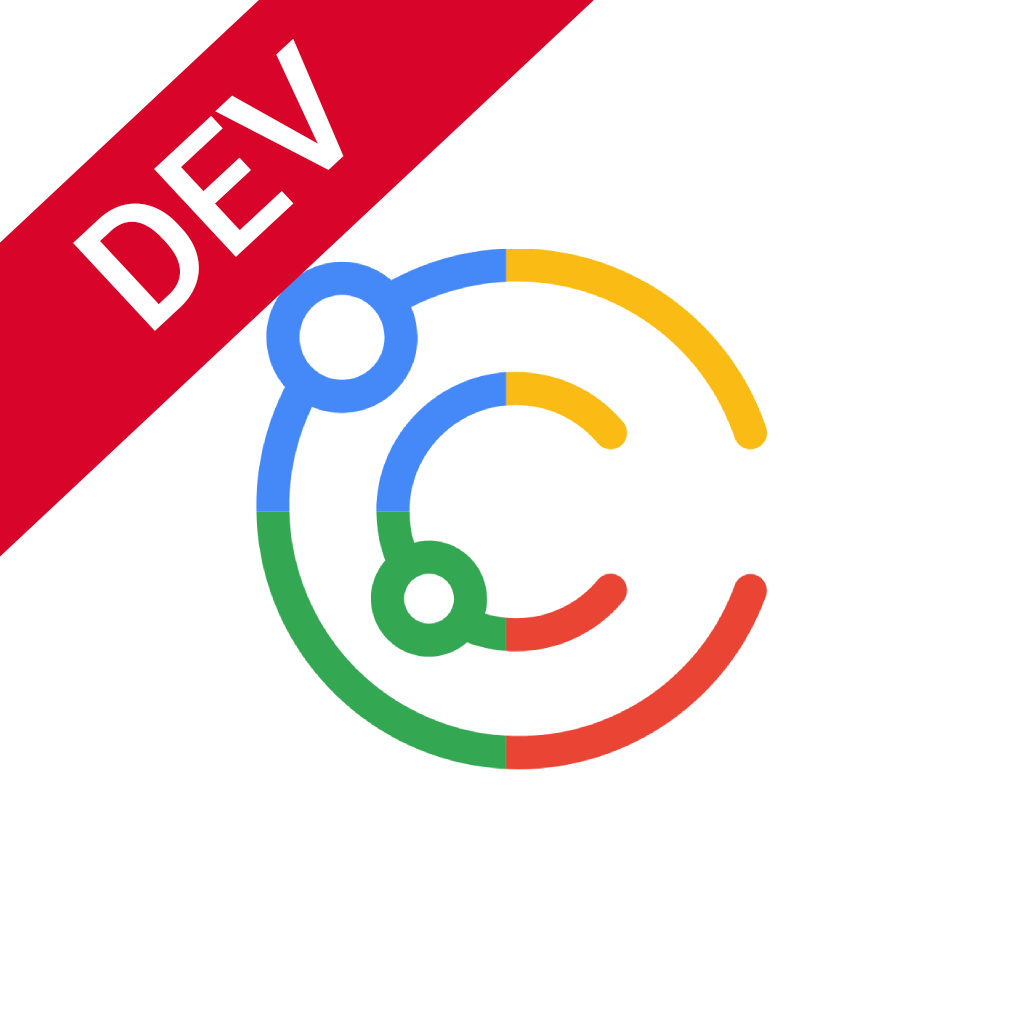
<style>
.page{position:relative;width:1024px;height:1024px;background:#ffffff}
.page>*{position:absolute;margin:0}
.t1{font:168.2px "Roboto-Medium";color:#ffffff}
</style>
<div class="page">
<p class="t1" style="left:73px;top:38px;width:271px;height:293px">DEV</p>
</div>
